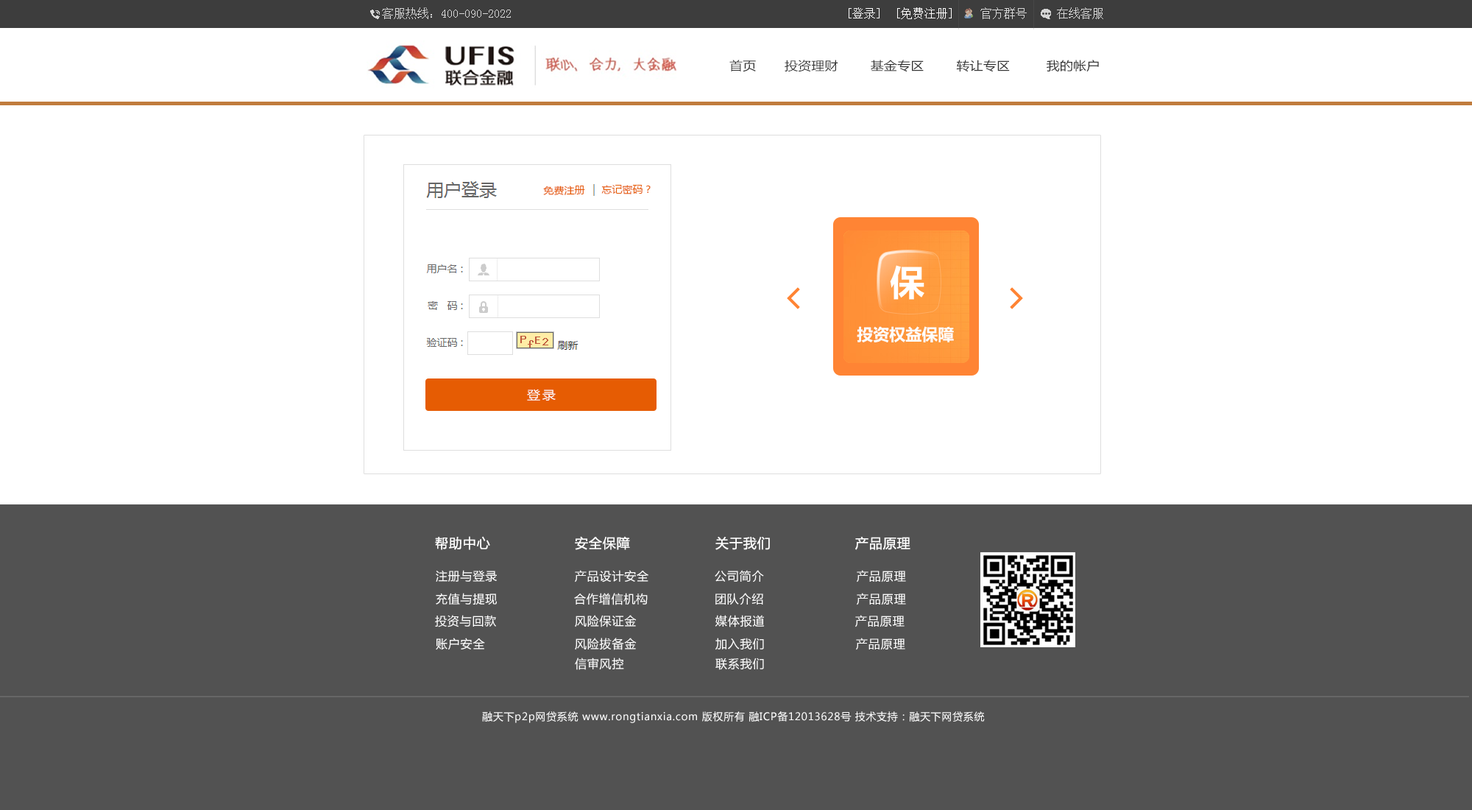
<style>
.page{position:relative;width:1472px;height:810px;background:#ffffff}
.page>*{position:absolute;margin:0}
.t1{font:11.8px "SimSun";color:#d6d6d6}
.t2{font:11.8px "SimSun";color:#fefefe}
.t3{font:11.8px "SimSun";color:#fffefe}
.t4{font:11.9px "MicrosoftYaHei";letter-spacing:0.01em;color:#333333;scale:1.11 1}
.t5{font:9.3px "MicrosoftYaHei";color:#e65c03;scale:1.11 1}
.t6{font:11.9px "MicrosoftYaHei";letter-spacing:0.15em;color:#ffffff;scale:1.11 1}
.t7{font:13.3px "MicrosoftYaHei";letter-spacing:0.05em;color:#ffffff}
.t8{font:11.8px "MicrosoftYaHei";letter-spacing:0.05em;color:#ffffff}
.t9{font:10.3px "MicrosoftYaHei";letter-spacing:0.05em;color:#ffffff}
</style>
<div class="page">
<p class="t1" style="left:382px;top:7px;width:129px;height:12px">客服热线：400-090-2022</p>
<p class="t2" style="left:849px;top:7px;width:31px;height:12px">[登录]</p>
<p class="t3" style="left:897px;top:7px;width:55px;height:12px">[免费注册]</p>
<p class="t1" style="left:981px;top:7px;width:123px;height:12px">官方群号     在线客服</p>
<p class="t4" style="left:730px;top:60px;width:369px;height:12px">首页       投资理财        基金专区        转让专区         我的帐户</p>
<p class="t5" style="left:543px;top:186px;width:42px;height:9px">免费注册</p>
<p class="t5" style="left:601px;top:185px;width:50px;height:9px">忘记密码？</p>
<p class="t6" style="left:527px;top:389px;width:29px;height:12px">登录</p>
<p class="t7" style="left:435px;top:536px;width:55px;height:14px">帮助中心</p>
<p class="t7" style="left:575px;top:536px;width:55px;height:14px">安全保障</p>
<p class="t7" style="left:716px;top:537px;width:54px;height:13px">关于我们</p>
<p class="t7" style="left:855px;top:536px;width:56px;height:14px">产品原理</p>
<p class="t8" style="left:436px;top:570px;width:61px;height:12px">注册与登录</p>
<p class="t8" style="left:575px;top:570px;width:74px;height:12px">产品设计安全</p>
<p class="t8" style="left:715px;top:570px;width:49px;height:12px">公司简介</p>
<p class="t8" style="left:857px;top:570px;width:49px;height:12px">产品原理</p>
<p class="t8" style="left:436px;top:593px;width:61px;height:12px">充值与提现</p>
<p class="t8" style="left:574px;top:593px;width:74px;height:12px">合作增信机构</p>
<p class="t8" style="left:716px;top:593px;width:47px;height:12px">团队介绍</p>
<p class="t8" style="left:857px;top:593px;width:49px;height:12px">产品原理</p>
<p class="t8" style="left:435px;top:615px;width:61px;height:12px">投资与回款</p>
<p class="t8" style="left:575px;top:615px;width:62px;height:12px">风险保证金</p>
<p class="t8" style="left:715px;top:615px;width:50px;height:12px">媒体报道</p>
<p class="t8" style="left:855px;top:615px;width:50px;height:12px">产品原理</p>
<p class="t8" style="left:436px;top:638px;width:49px;height:12px">账户安全</p>
<p class="t8" style="left:575px;top:638px;width:62px;height:12px">风险拔备金</p>
<p class="t8" style="left:716px;top:638px;width:48px;height:12px">加入我们</p>
<p class="t8" style="left:856px;top:638px;width:50px;height:12px">产品原理</p>
<p class="t8" style="left:575px;top:657px;width:49px;height:13px">信审风控</p>
<p class="t8" style="left:716px;top:657px;width:48px;height:13px">联系我们</p>
<p class="t9" style="left:482px;top:711px;width:503px;height:12px">融天下p2p网贷系统 www.rongtianxia.com 版权所有 融ICP备12013628号 技术支持：融天下网贷系统</p>
</div>
